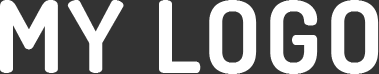
<style>
.page{position:relative;width:379px;height:74px;background:#333333}
.page>*{position:absolute;margin:0}
.t1{font:100px "Dosis-Bold";letter-spacing:0.04em;color:#ffffff;text-transform:uppercase}
</style>
<div class="page">
<p class="t1" style="left:0px;top:0px;width:379px;height:74px">MY LOGO</p>
</div>
